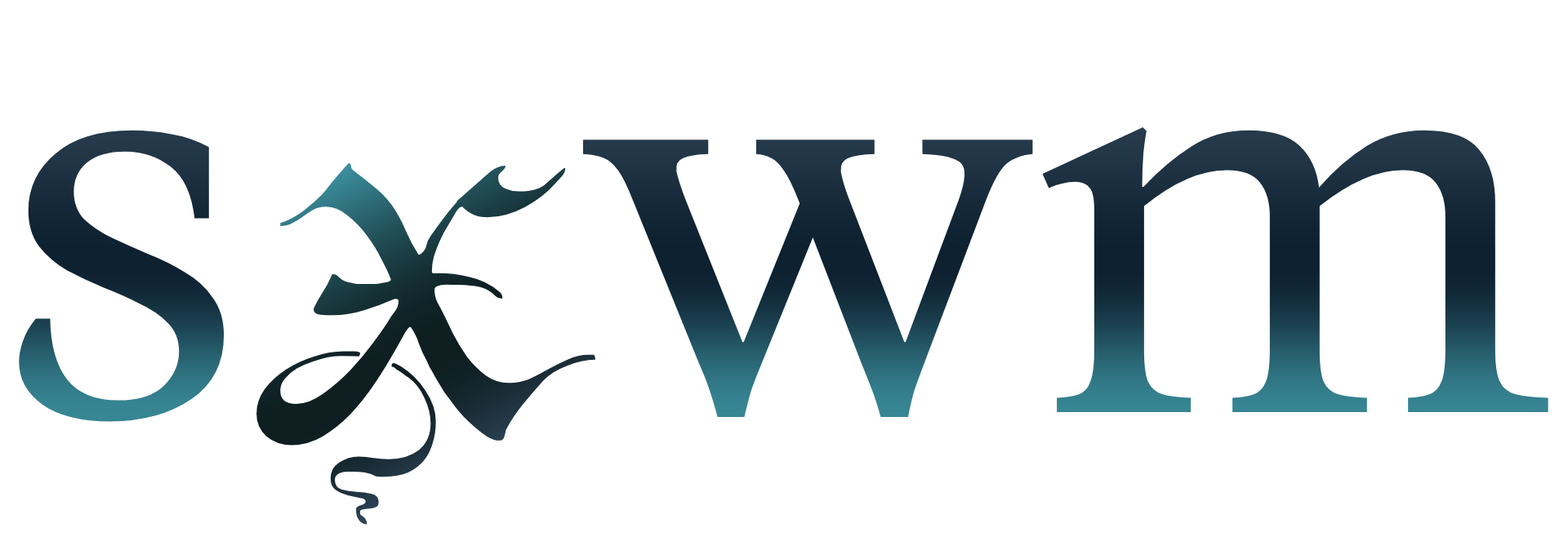
<style>
.page{position:relative;width:1568px;height:550px;background:#ffffff}
.page>*{position:absolute;margin:0}
.t1{font:619.5px "BonaNova-Regular";color:#1d3445}
.t2{font:381.1px "Zenda";color:#162d34;scale:1.14 1}
</style>
<div class="page">
<p class="t1" style="left:19px;top:127px;width:1529px;height:295px">s   wm</p>
<p class="t2" style="left:256px;top:163px;width:339px;height:362px">X</p>
</div>
